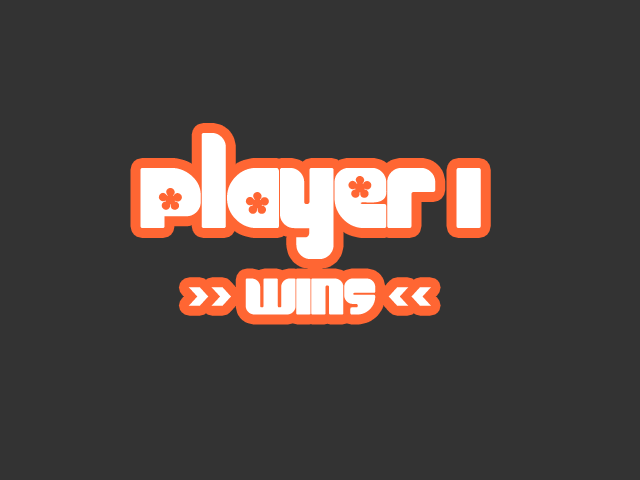
<style>
.page{position:relative;width:640px;height:480px;background:#333333}
.page>*{position:absolute;margin:0}
.t1{font:72px "Chick";color:#ffffff}
.t2{font:120px "Chick";color:#ffffff}
</style>
<div class="page">
<p class="t1" style="left:140px;top:133px;width:341px;height:182px;text-align:center"><span class="t2">Player 1<br></span>&gt;&gt; WINS &lt;&lt;</p>
</div>
